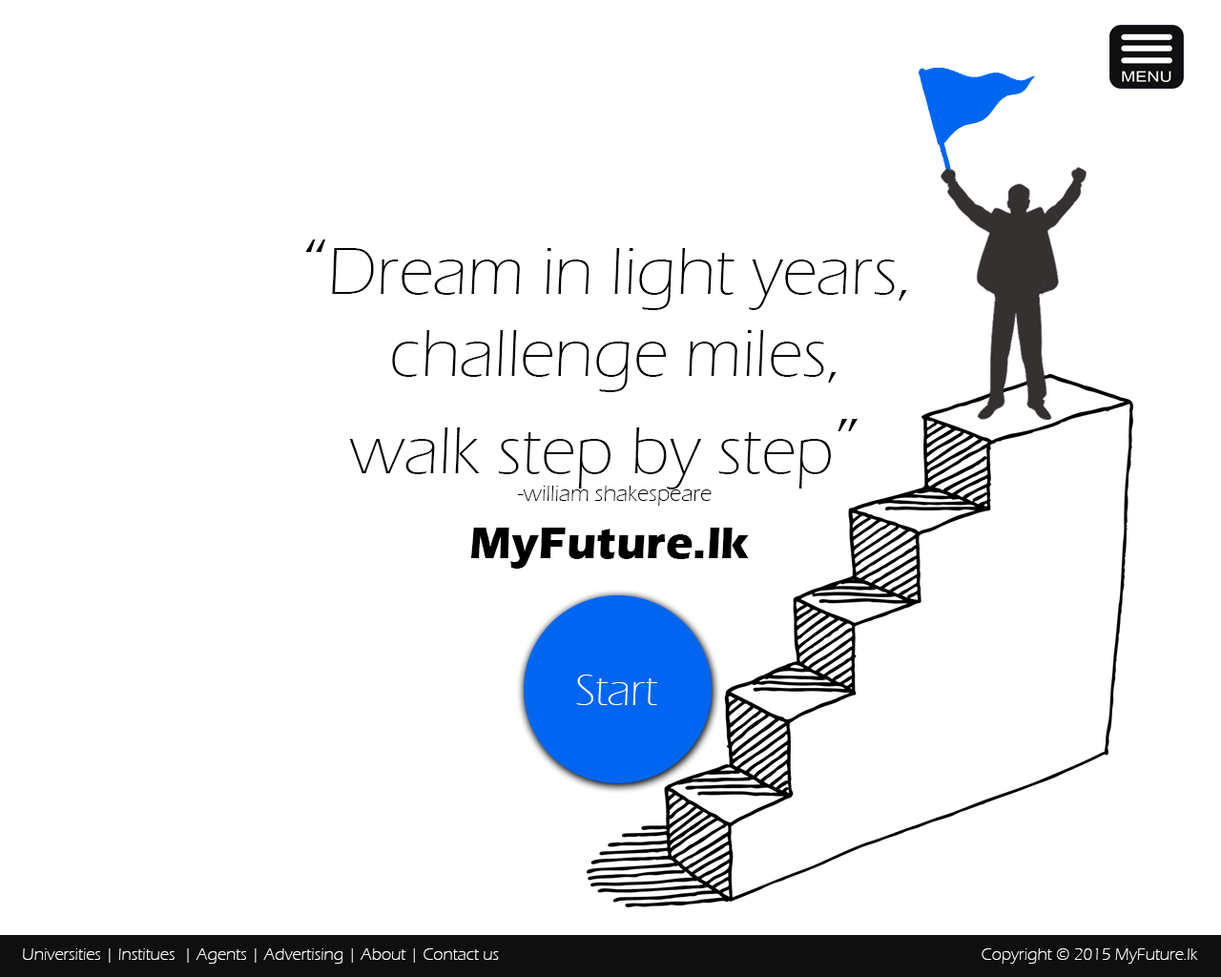
<style>
.page{position:relative;width:1221px;height:977px;background:#ffffff}
.page>*{position:absolute;margin:0}
.t1{font:68.7px "ErasITC-Light";color:#000000}
.t2{font:81.1px "ErasITC-Light";color:#000000}
.t3{font:22.9px "ErasITC-Light";color:#000000}
.t4{font:45.8px "ErasITC-Bold";color:#000000}
.t5{font:45.8px "ErasITC-Light";color:#ffffff}
.t6{font:17.2px "ErasITC-Light";color:#ffffff}
</style>
<div class="page">
<p class="t1" style="left:305px;top:239px;width:602px;height:267px;text-align:center"><span class="t2">“</span>Dream in light years, <br>challenge miles,<br>walk step by step<span class="t2">” <br></span><span class="t3">-william shakespeare</span></p>
<p class="t4" style="left:470px;top:527px;width:279px;height:41px">MyFuture.lk</p>
<p class="t5" style="left:576px;top:674px;width:82px;height:31px">Start</p>
<p class="t6" style="left:23px;top:948px;width:476px;height:15px">Universities | Institues  | Agents | Advertising | About | Contact us</p>
<p class="t6" style="left:981px;top:948px;width:217px;height:15px">Copyright © 2015 MyFuture.lk</p>
</div>
